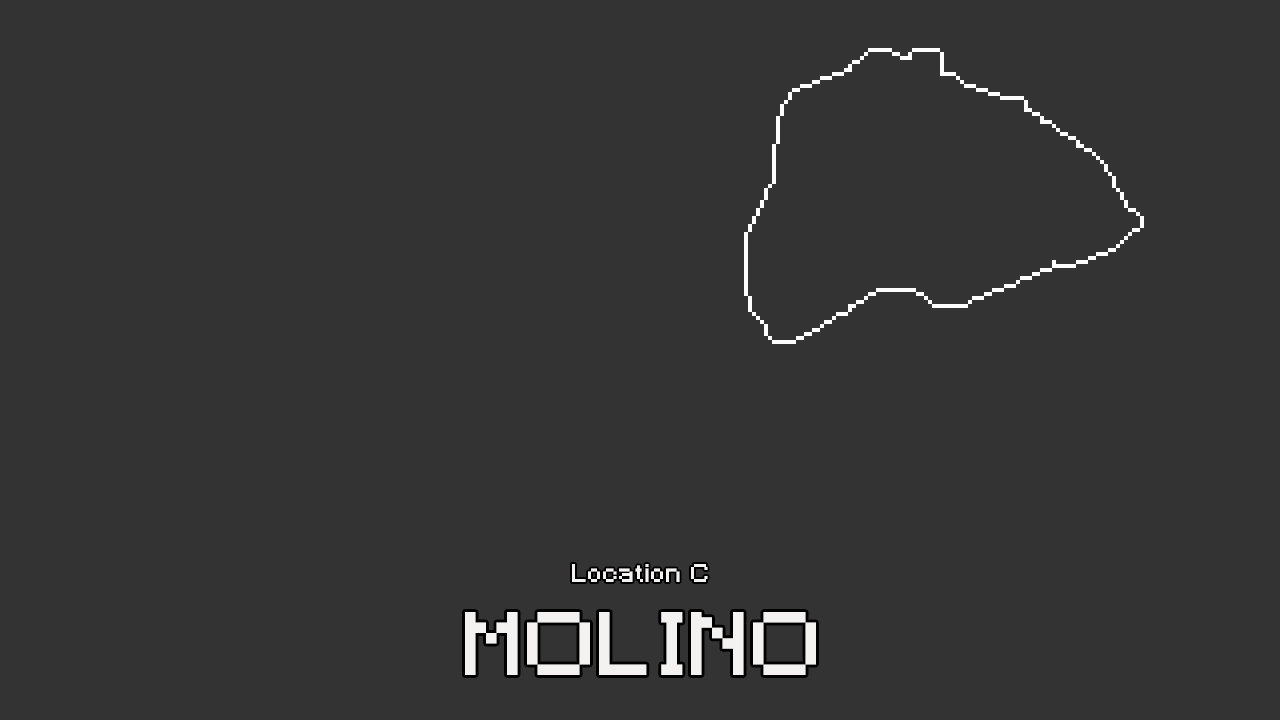
<style>
.page{position:relative;width:1280px;height:720px;background:#333333}
.page>*{position:absolute;margin:0}
.t1{font:24px "Minecraft";letter-spacing:0.05em;color:#f4f1f1}
.t2{font:84px "Minecraft";letter-spacing:0.05em;color:#f4f1f1}
</style>
<div class="page">
<p class="t1" style="left:572px;top:564px;width:136px;height:18px">Location C</p>
<p class="t2" style="left:465px;top:612px;width:351px;height:63px">MOLINO</p>
</div>
